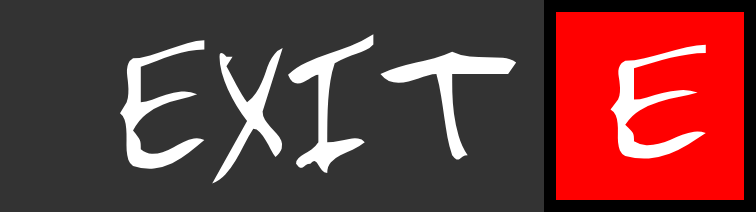
<style>
.page{position:relative;width:756px;height:212px;background:#333333}
.page>*{position:absolute;margin:0}
.t1{font:176.6px "2Dumb";color:#ffffff;scale:0.78 1}
.t2{font:156.4px "2Dumb";color:#ffffff}
</style>
<div class="page">
<p class="t1" style="left:120px;top:34px;width:397px;height:150px">EXIT</p>
<p class="t2" style="left:610px;top:44px;width:96px;height:116px">E</p>
</div>
